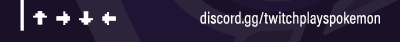
<style>
.page{position:relative;width:400px;height:42px;background:#1a1129}
.page>*{position:absolute;margin:0}
.t1{font:16px "AcuminProCond-Light";letter-spacing:0.025em;color:#ffffff}
</style>
<div class="page">
<p class="t1" style="left:200px;top:11px;width:180px;height:16px">discord.gg/twitchplayspokemon</p>
</div>
